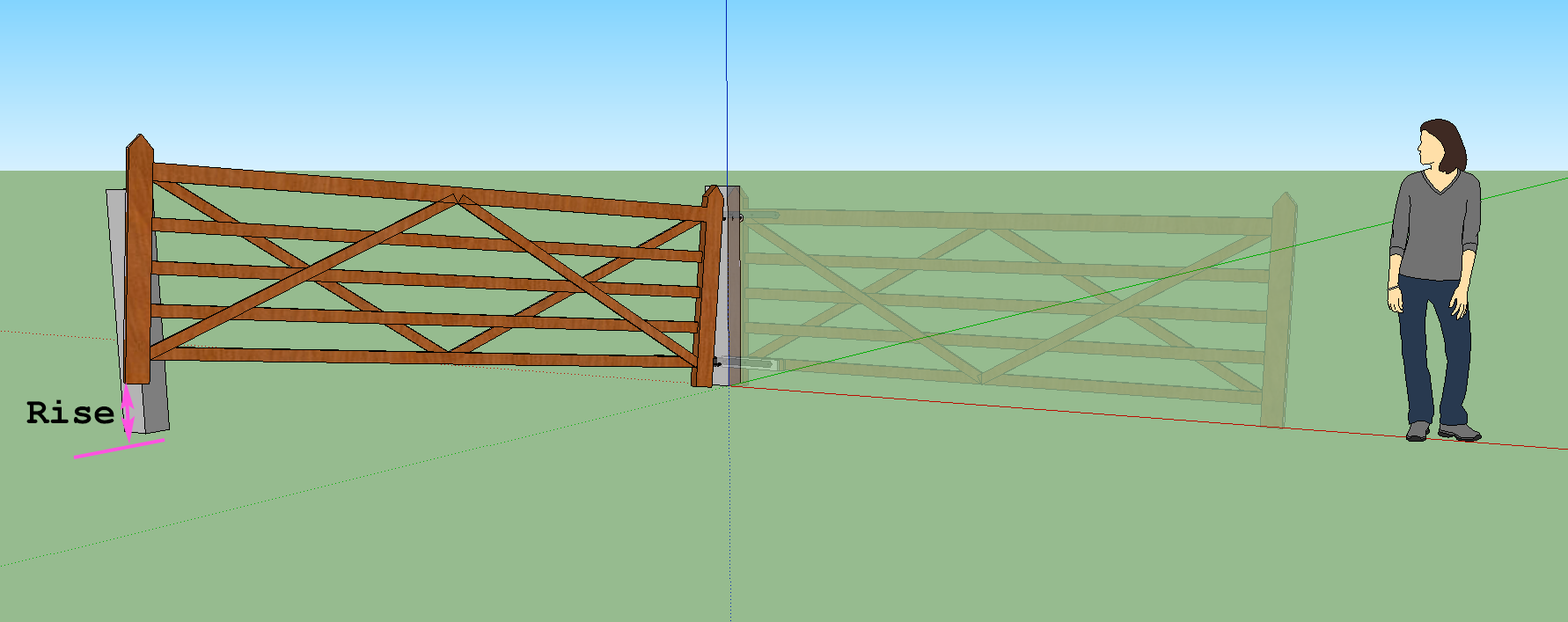
<style>
.page{position:relative;width:1568px;height:622px;background:#96bb8f}
.page>*{position:absolute;margin:0}
.t1{font:37.4px "FreeMonoBold";color:#000000}
</style>
<div class="page">
<p class="t1" style="left:26px;top:399px;width:88px;height:25px">Rise</p>
</div>
